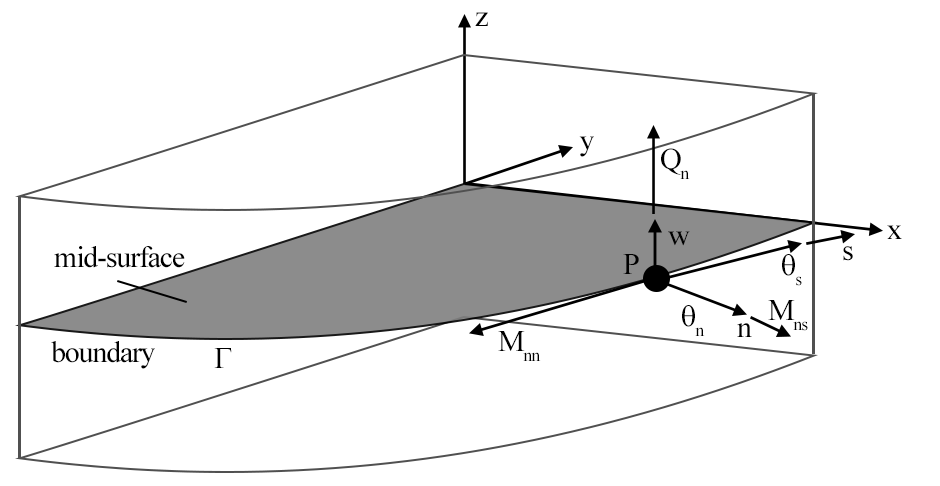
<style>
.page{position:relative;width:940px;height:486px;background:#ffffff}
.page>*{position:absolute;margin:0}
.t1{font:30px "TimesNewRomanPSMT";letter-spacing:-0.04em;color:#000000}
</style>
<div class="page">
<p class="t1" style="left:475px;top:12px;width:13px;height:14px">z</p>
<p class="t1" style="left:579px;top:136px;width:15px;height:21px">y</p>
<p class="t1" style="left:661px;top:148px;width:29px;height:31px">Qn</p>
<p class="t1" style="left:668px;top:231px;width:22px;height:15px">w</p>
<p class="t1" style="left:887px;top:225px;width:15px;height:14px">x</p>
<p class="t1" style="left:54px;top:246px;width:131px;height:22px">mid-surface</p>
<p class="t1" style="left:843px;top:246px;width:10px;height:15px">s</p>
<p class="t1" style="left:623px;top:254px;width:16px;height:20px">P</p>
<p class="t1" style="left:768px;top:300px;width:40px;height:31px">Mns</p>
<p class="t1" style="left:737px;top:323px;width:15px;height:14px">n</p>
<p class="t1" style="left:51px;top:341px;width:104px;height:28px">boundary</p>
<p class="t1" style="left:498px;top:331px;width:43px;height:30px">Mnn</p>
</div>
